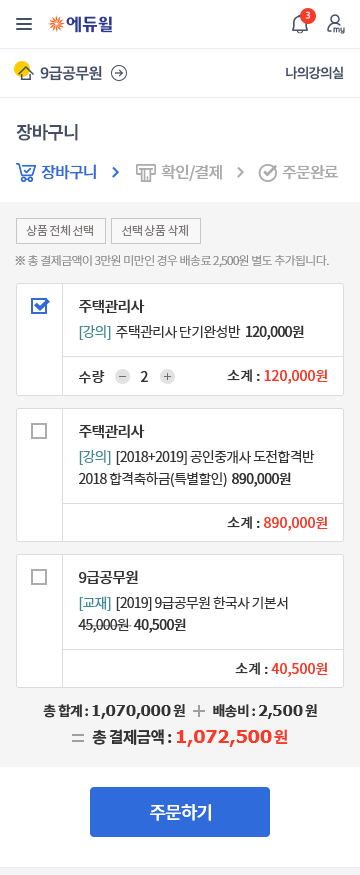
<style>
.page{position:relative;width:360px;height:875px;background:#ffffff}
.page>*{position:absolute;margin:0}
.t1{font:18px "NotoSansCJKkr-Bold";letter-spacing:-0.05em;color:#454f63}
.t2{font:16px "NotoSansCJKkr-Medium";letter-spacing:-0.05em;color:#2f6bda}
.t3{font:16px "NotoSansCJKkr-Medium";letter-spacing:-0.05em;color:#aaaaaa}
.t4{font:12px "NotoSansCJKkr-DemiLight";letter-spacing:-0.05em;color:#7d7877}
.t5{font:12px "NotoSansCJKkr-Light";letter-spacing:-0.05em;color:#888888}
.t6{font:15px "NotoSansCJKkr-Medium";letter-spacing:-0.05em;color:#333333}
.t7{font:14px "NotoSansCJKkr-Regular";letter-spacing:-0.05em;color:#333333}
.t8{font:14px "NotoSansCJKkr-Regular";letter-spacing:-0.05em;color:#3f8b95}
.t9{font:14px "NotoSansCJKkr-Medium";letter-spacing:-0.05em;color:#333333}
.t10{font:14px "NotoSansCJKkr-Medium";color:#333333}
.t11{font:14px "NotoSansCJKkr-Medium";color:#f63b28}
.t12{font:14px/22px "NotoSansCJKkr-Regular";letter-spacing:-0.05em;color:#333333}
.t13{font:14px/22px "NotoSansCJKkr-Regular";letter-spacing:-0.05em;color:#3f8b95}
.t14{font:14px/22px "NotoSansCJKkr-Medium";letter-spacing:-0.05em;color:#333333}
.t15{font:14px "NotoSansCJKkr-Bold";letter-spacing:-0.05em;color:#333333}
.t16{font:15px "Verdana-Bold";letter-spacing:-0.05em;color:#333333}
.t17{font:18px "Verdana-Bold";letter-spacing:-0.05em;color:#f63b28}
.t18{font:16px "NotoSansCJKkr-Bold";letter-spacing:-0.05em;color:#333333}
.t19{font:16px "NotoSansCJKkr-Bold";letter-spacing:-0.05em;color:#f63b28}
.t20{font:18px "NotoSansCJKkr-Medium";letter-spacing:-0.05em;color:#ffffff}
</style>
<div class="page">
<p class="t1" style="left:16px;top:124px;width:62px;height:17px">장바구니</p>
<p class="t2" style="left:41px;top:164px;width:55px;height:16px">장바구니</p>
<p class="t3" style="left:161px;top:164px;width:61px;height:17px">확인/결제</p>
<p class="t3" style="left:282px;top:165px;width:56px;height:15px">주문완료</p>
<p class="t4" style="left:26px;top:225px;width:67px;height:11px">상품 전체 선택</p>
<p class="t4" style="left:122px;top:224px;width:66px;height:13px">선택 상품 삭제</p>
<p class="t5" style="left:15px;top:255px;width:314px;height:12px">※ 총 결제금액이 3만원 미만인 경우 배송료 2,500원 별도 추가됩니다.</p>
<p class="t6" style="left:79px;top:299px;width:66px;height:15px">주택관리사</p>
<p class="t7" style="left:79px;top:325px;width:225px;height:15px"><span class="t8">[강의]  </span>주택관리사 단기완성반  <span class="t9">120,000원</span></p>
<p class="t10" style="left:79px;top:370px;width:26px;height:14px">수량</p>
<p class="t10" style="left:140px;top:371px;width:8px;height:11px">2</p>
<p class="t11" style="left:227px;top:369px;width:101px;height:15px"><span class="t10">소계 : </span>120,000원</p>
<p class="t6" style="left:79px;top:424px;width:66px;height:15px">주택관리사</p>
<p class="t12" style="left:79px;top:450px;width:236px;height:37px"><span class="t13">[강의]  </span>[2018+2019] 공인중개사 도전합격반<br>2018 합격축하금(특별할인)  <span class="t14">890,000원</span></p>
<p class="t11" style="left:227px;top:516px;width:101px;height:15px"><span class="t10">소계 : </span>890,000원</p>
<p class="t6" style="left:79px;top:570px;width:59px;height:15px">9급공무원</p>
<p class="t12" style="left:78px;top:596px;width:210px;height:37px"><span class="t13">[교재] </span> [2019] 9급공무원 한국사 기본서 <br>45,000원  <span class="t14">40,500원</span></p>
<p class="t11" style="left:235px;top:662px;width:93px;height:15px"><span class="t10">소계 : </span>40,500원</p>
<p class="t15" style="left:43px;top:704px;width:274px;height:15px">총 합계 : <span class="t16">1,070,000</span>원           배송비 : <span class="t16">2,500</span>원</p>
<p class="t17" style="left:92px;top:729px;width:196px;height:18px"><span class="t18">총 결제금액 : </span>1,072,500<span class="t19">원</span></p>
<p class="t20" style="left:150px;top:804px;width:61px;height:17px">주문하기</p>
</div>
